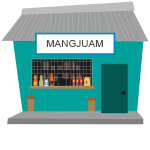
<style>
.page{position:relative;width:150px;height:150px;background:#ffffff}
.page>*{position:absolute;margin:0}
.t1{font:10px "ArialMT";color:#4d4d4d}
</style>
<div class="page">
<p class="t1" style="left:46px;top:40px;width:57px;height:7px">MANGJUAM</p>
</div>
